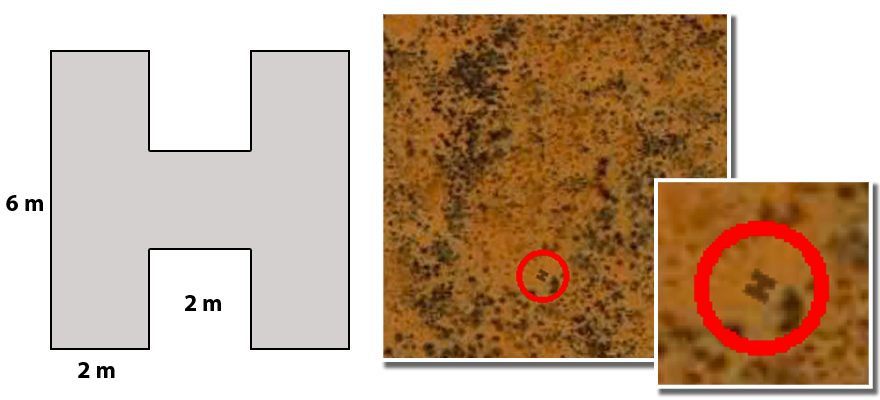
<style>
.page{position:relative;width:880px;height:400px;background:#ffffff}
.page>*{position:absolute;margin:0}
.t1{font:24px "MyriadPro-Bold";color:#000000}
</style>
<div class="page">
<p class="t1" style="left:6px;top:195px;width:37px;height:16px">6 m</p>
<p class="t1" style="left:185px;top:295px;width:36px;height:16px">2 m</p>
<p class="t1" style="left:78px;top:362px;width:37px;height:16px">2 m</p>
</div>
